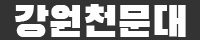
<style>
.page{position:relative;width:200px;height:40px;background:#333333}
.page>*{position:absolute;margin:0}
.t1{font:41.7px "BlackHanSans-Regular";color:#fefefe}
</style>
<div class="page">
<p class="t1" style="left:15px;top:4px;width:171px;height:33px">강원천문대</p>
</div>
